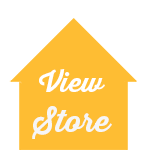
<style>
.page{position:relative;width:150px;height:150px;background:#ffffff}
.page>*{position:absolute;margin:0}
.t1{font:27px "ThirstyScript-Bold";color:#ffffff}
.t2{font:30.6px "ThirstyScript-Bold";color:#f6f6f6}
</style>
<div class="page">
<p class="t1" style="left:39px;top:69px;width:66px;height:23px">View</p>
<p class="t2" style="left:32px;top:106px;width:80px;height:33px">Store</p>
</div>
